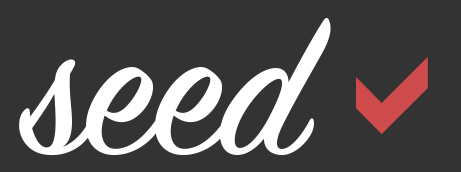
<style>
.page{position:relative;width:461px;height:172px;background:#333333}
.page>*{position:absolute;margin:0}
.t1{font:212.9px "SignPainter-HouseScript";color:#ffffff}
</style>
<div class="page">
<p class="t1" style="left:19px;top:17px;width:312px;height:139px">seed</p>
</div>
